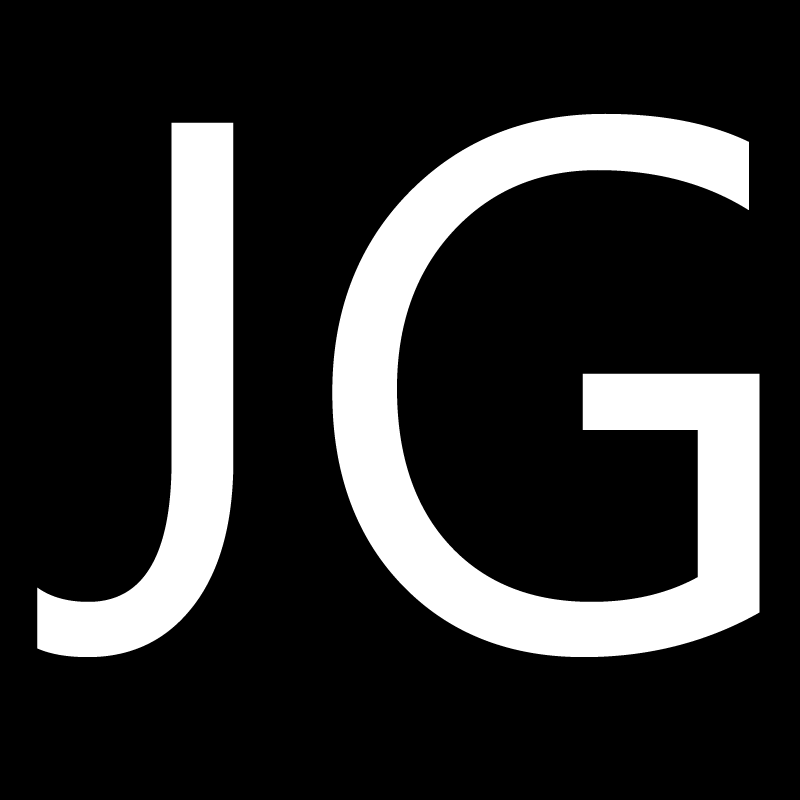
<style>
.page{position:relative;width:800px;height:800px;background:#000000}
.page>*{position:absolute;margin:0}
.t1{font:750px "Ebrima";color:#ffffff}
</style>
<div class="page">
<p class="t1" style="left:37px;top:113px;width:723px;height:544px">JG</p>
</div>
